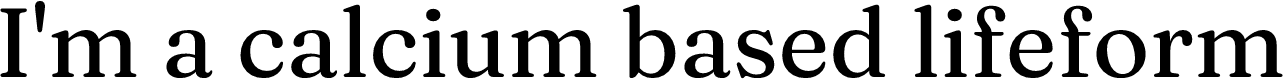
<style>
.page{position:relative;width:1283px;height:79px;background:#ffffff}
.page>*{position:absolute;margin:0}
.t1{font:98px "Fraunces-Regular";color:#000000}
</style>
<div class="page">
<p class="t1" style="left:0px;top:0px;width:1283px;height:79px">I'm a calcium based lifeform</p>
</div>
